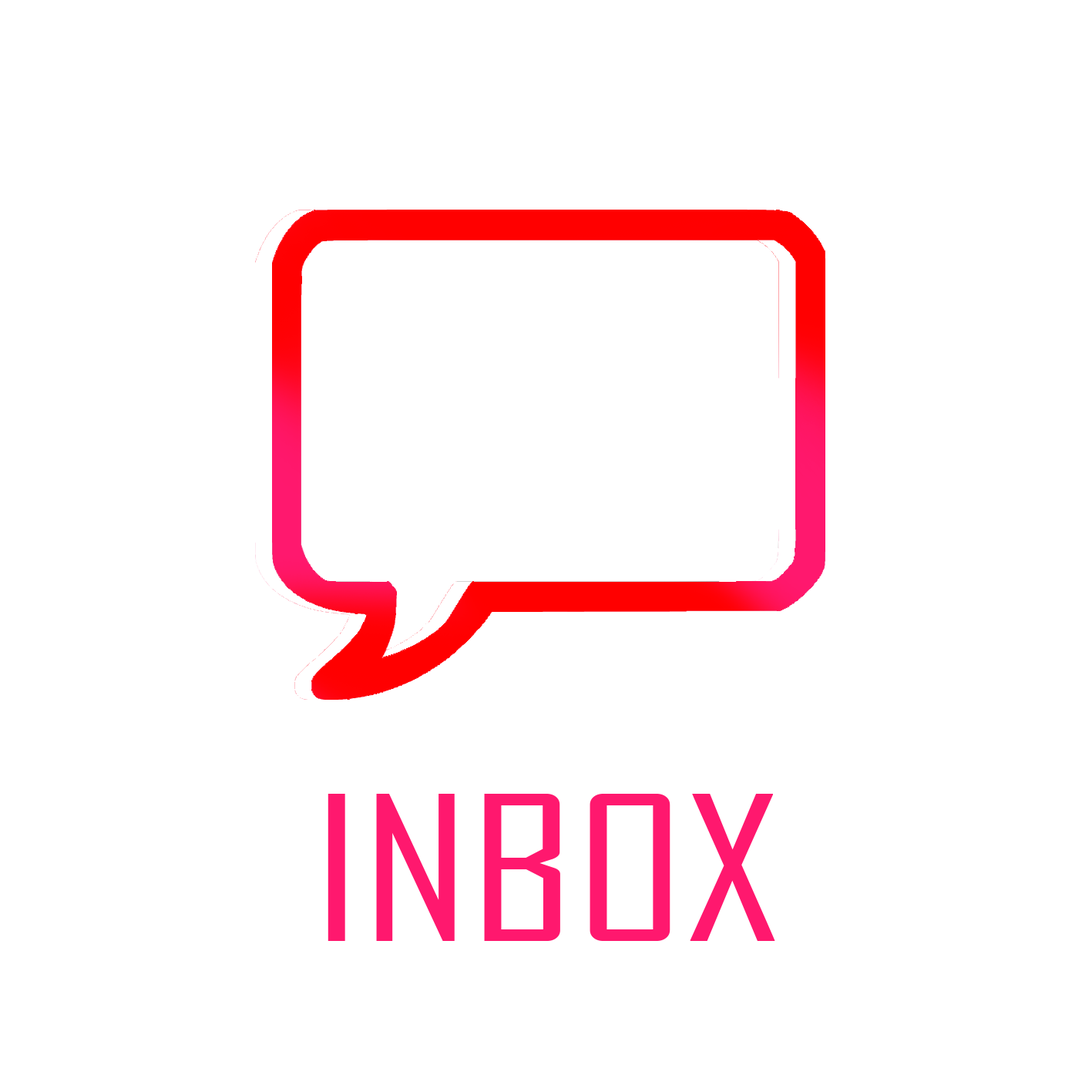
<style>
.page{position:relative;width:1092px;height:1092px;background:#ffffff}
.page>*{position:absolute;margin:0}
.t1{font:192.6px "AgencyFB-Reg";color:#ff186e;scale:1.29 1}
</style>
<div class="page">
<p class="t1" style="left:328px;top:794px;width:447px;height:147px">INBOX</p>
</div>
